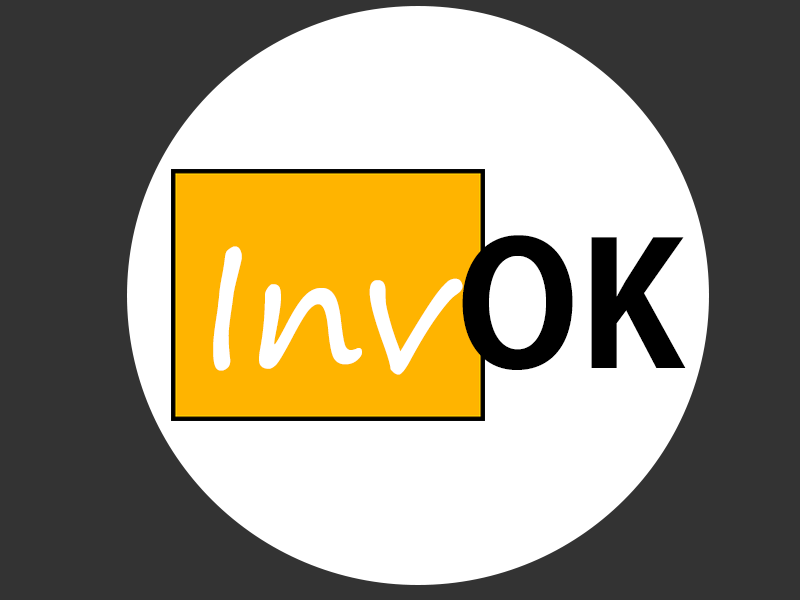
<style>
.page{position:relative;width:800px;height:600px;background:#333333}
.page>*{position:absolute;margin:0}
.t1{font:170px "SegoePrint";color:#ffffff}
.t2{font:170px "KozGoPr6N-Bold";color:#000000}
</style>
<div class="page">
<p class="t1" style="left:213px;top:235px;width:473px;height:140px">Inv<span class="t2">OK</span></p>
</div>
